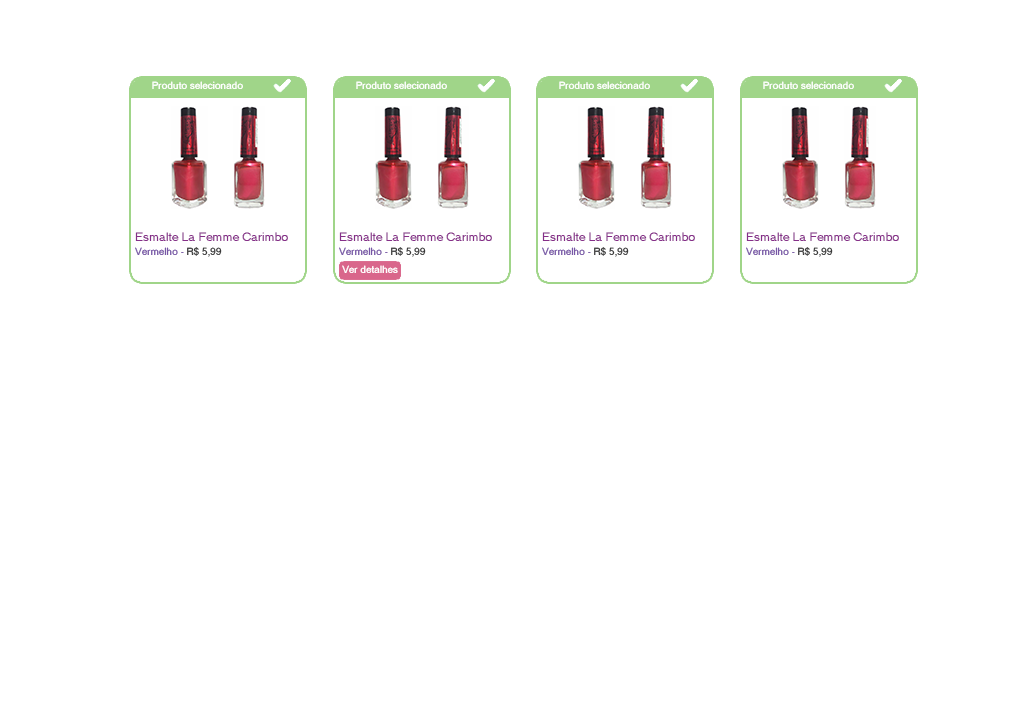
<style>
.page{position:relative;width:1024px;height:720px;background:#ffffff}
.page>*{position:absolute;margin:0}
.t1{font:10px "MS Sans Serif";color:#ffffff}
.t2{font:12px "MS Sans Serif";color:#862f89}
.t3{font:10px "MS Sans Serif";color:#7756a6}
.t4{font:10px "MS Sans Serif";color:#393939}
</style>
<div class="page">
<p class="t1" style="left:152px;top:81px;width:91px;height:8px">Produto selecionado</p>
<p class="t1" style="left:356px;top:81px;width:91px;height:8px">Produto selecionado</p>
<p class="t1" style="left:559px;top:81px;width:91px;height:8px">Produto selecionado</p>
<p class="t1" style="left:763px;top:81px;width:91px;height:8px">Produto selecionado</p>
<p class="t2" style="left:135px;top:232px;width:153px;height:9px">Esmalte La Femme Carimbo</p>
<p class="t2" style="left:339px;top:232px;width:153px;height:9px">Esmalte La Femme Carimbo</p>
<p class="t2" style="left:542px;top:232px;width:153px;height:9px">Esmalte La Femme Carimbo</p>
<p class="t2" style="left:746px;top:232px;width:153px;height:9px">Esmalte La Femme Carimbo</p>
<p class="t3" style="left:135px;top:247px;width:87px;height:10px">Vermelho - <span class="t4">R$ 5,99</span></p>
<p class="t3" style="left:339px;top:247px;width:87px;height:10px">Vermelho - <span class="t4">R$ 5,99</span></p>
<p class="t3" style="left:542px;top:247px;width:87px;height:10px">Vermelho - <span class="t4">R$ 5,99</span></p>
<p class="t3" style="left:746px;top:247px;width:87px;height:10px">Vermelho - <span class="t4">R$ 5,99</span></p>
<p class="t1" style="left:342px;top:265px;width:56px;height:8px">Ver detalhes</p>
</div>
